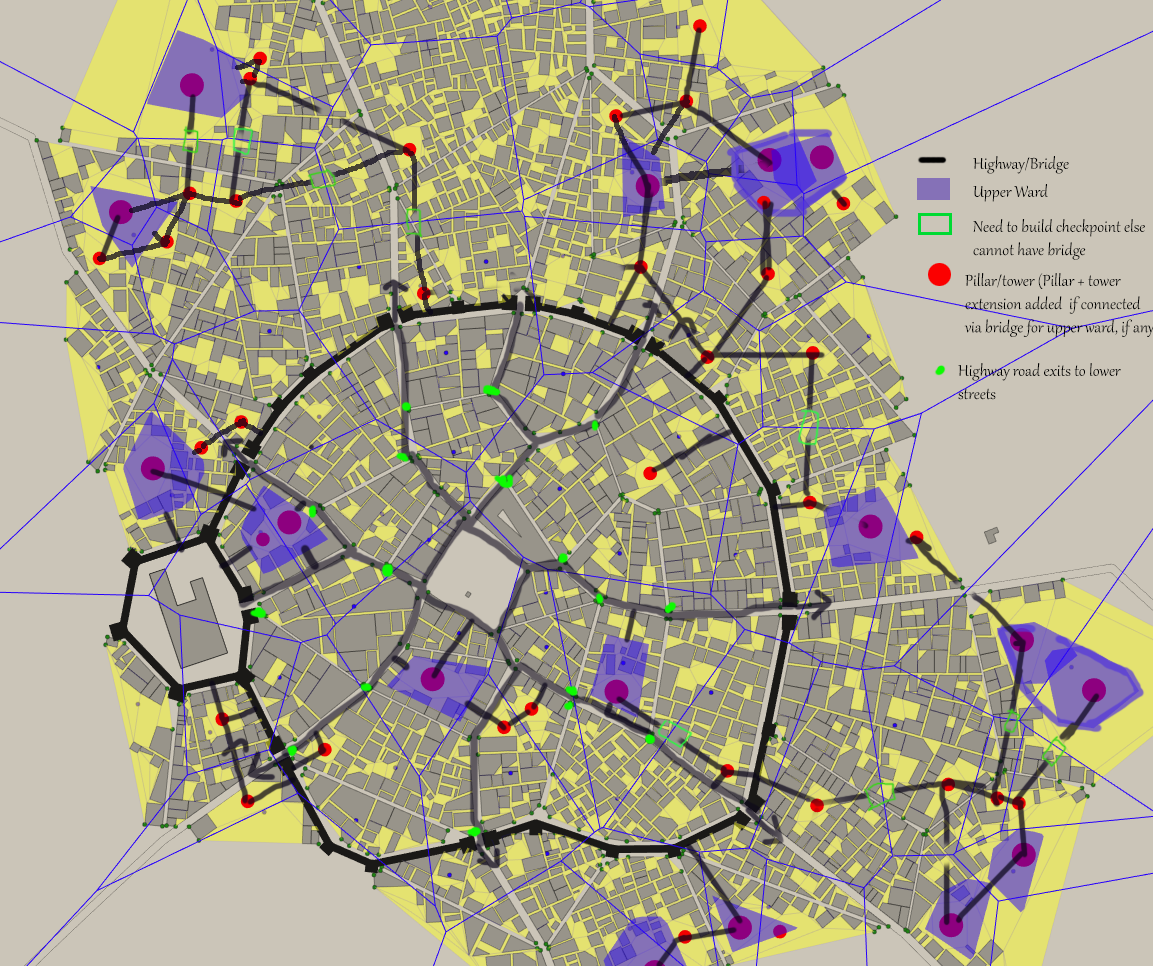
<style>
.page{position:relative;width:1153px;height:966px;background:#cbc5b8}
.page>*{position:absolute;margin:0}
.t1{font:19.3px "Gabriola";color:#000000}
</style>
<div class="page">
<p class="t1" style="left:973px;top:156px;width:96px;height:18px">Highway/Bridge</p>
<p class="t1" style="left:973px;top:184px;width:75px;height:18px">Upper Ward</p>
<p class="t1" style="left:973px;top:219px;width:172px;height:41px">Need to build checkpoint else<br>cannot have bridge</p>
<p class="t1" style="left:958px;top:363px;width:163px;height:37px">Highway road exits to lower streets</p>
</div>
